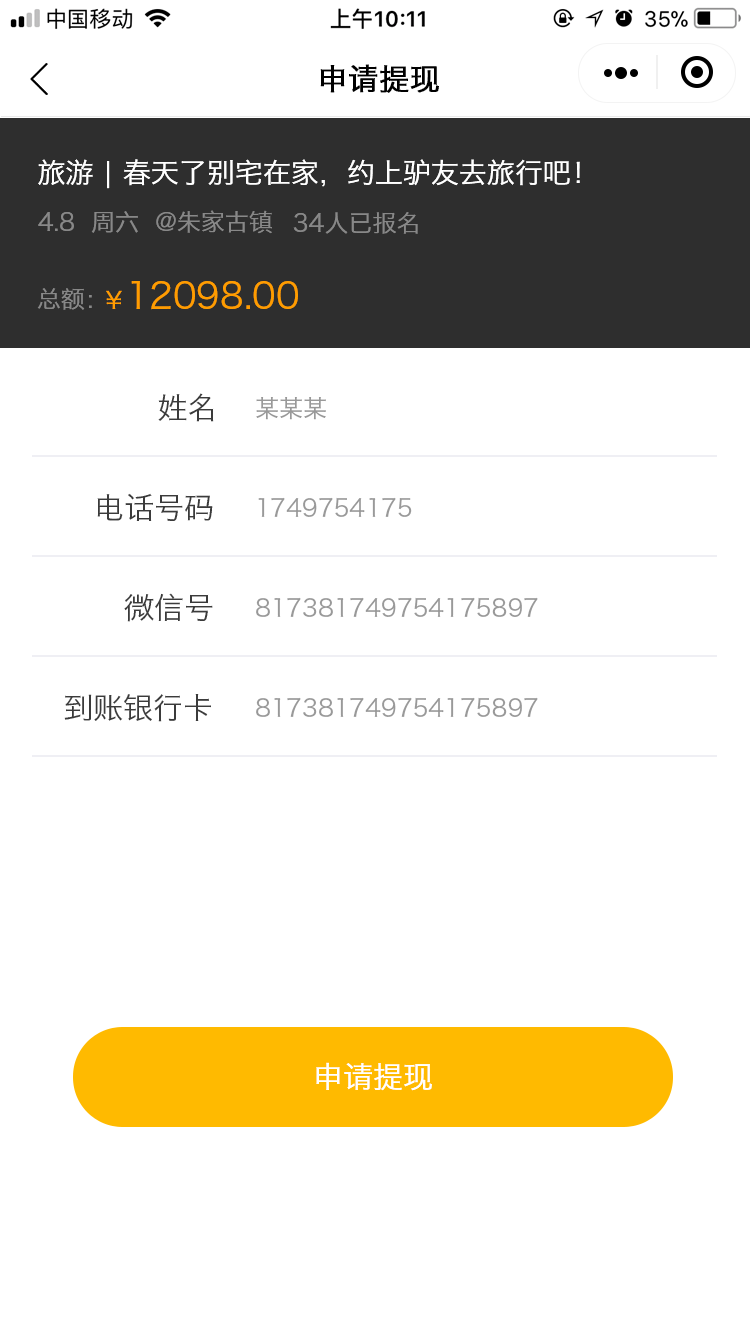
<style>
.page{position:relative;width:750px;height:1334px;background:#ffffff}
.page>*{position:absolute;margin:0}
.t1{font:30px "HiraginoSansGB-W3";color:#000000;text-transform:uppercase;font-weight:bold}
.t2{font:28px "HiraginoSansGB-W3";color:#ffffff}
.t3{font:24px "HiraginoSansGB-W3";color:#888888}
.t4{font:36px "HiraginoSansGB-W3";color:#ff9c00}
.t5{font:24px "HiraginoSansGB-W3";color:#ff9c00}
.t6{font:30px "HiraginoSansGB-W3";color:#3b3b3b;text-transform:uppercase}
.t7{font:24px "HiraginoSansGB-W3";color:#999999;text-transform:uppercase}
.t8{font:30px "HiraginoSansGB-W3";color:#ffffff;text-transform:uppercase}
</style>
<div class="page">
<p class="t1" style="left:320px;top:64px;width:119px;height:29px">申请提现</p>
<p class="t2" style="left:38px;top:159px;width:542px;height:30px">旅游 | 春天了别宅在家，约上驴友去旅行吧！</p>
<p class="t3" style="left:38px;top:210px;width:234px;height:24px">4.8  周六  @朱家古镇</p>
<p class="t3" style="left:293px;top:212px;width:125px;height:22px">34人已报名</p>
<p class="t4" style="left:106px;top:281px;width:192px;height:29px"><span class="t5">￥</span>12098.00</p>
<p class="t3" style="left:37px;top:288px;width:55px;height:22px">总额：</p>
<p class="t6" style="left:158px;top:393px;width:56px;height:29px">姓名</p>
<p class="t7" style="left:256px;top:397px;width:70px;height:23px">某某某</p>
<p class="t6" style="left:97px;top:493px;width:116px;height:28px">电话号码</p>
<p class="t7" style="left:258px;top:497px;width:154px;height:20px">1749754175</p>
<p class="t6" style="left:124px;top:593px;width:89px;height:29px">微信号</p>
<p class="t7" style="left:256px;top:597px;width:282px;height:20px">817381749754175897</p>
<p class="t6" style="left:64px;top:694px;width:147px;height:28px">到账银行卡</p>
<p class="t7" style="left:256px;top:697px;width:282px;height:20px">817381749754175897</p>
<p class="t8" style="left:316px;top:1062px;width:116px;height:29px">申请提现</p>
</div>
